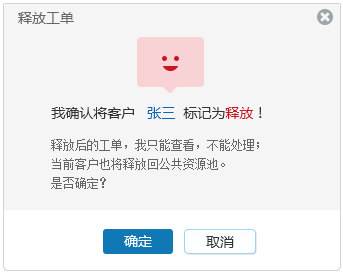
<style>
.page{position:relative;width:343px;height:276px;background:#f5f5f5}
.page>*{position:absolute;margin:0}
.t1{font:14px "MicrosoftYaHei";color:#666666}
.t2{font:14px "MicrosoftYaHei";color:#333333}
.t3{font:14px "MicrosoftYaHei";color:#0068b7}
.t4{font:14px "MicrosoftYaHei";color:#c81623}
.t5{font:12px/19px "NSimSun";color:#666666}
.t6{font:14px "MicrosoftYaHei";color:#ffffff}
</style>
<div class="page">
<p class="t1" style="left:18px;top:12px;width:56px;height:12px">释放工单</p>
<p class="t2" style="left:51px;top:107px;width:211px;height:12px">我确认将客户   <span class="t3">张三</span>  标记为<span class="t4">释放</span>！</p>
<p class="t5" style="left:51px;top:139px;width:208px;height:50px">释放后的工单，我只能查看，不能处理；<br>当前客户也将释放回公共资源池。<br>是否确定？</p>
<p class="t6" style="left:124px;top:235px;width:28px;height:12px">确定</p>
<p class="t2" style="left:206px;top:236px;width:28px;height:12px">取消</p>
</div>
